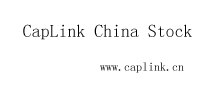
<style>
.page{position:relative;width:217px;height:93px;background:#ffffff}
.page>*{position:absolute;margin:0}
.t1{font:17.8px "SimSun";color:#000000}
.t2{font:12px "SimSun"}
</style>
<div class="page">
<p class="t1" style="left:23px;top:24px;width:169px;height:16px">CapLink China Stock</p>
<p class="t2" style="left:100px;top:62px;width:84px;height:11px">www.caplink.cn</p>
</div>
